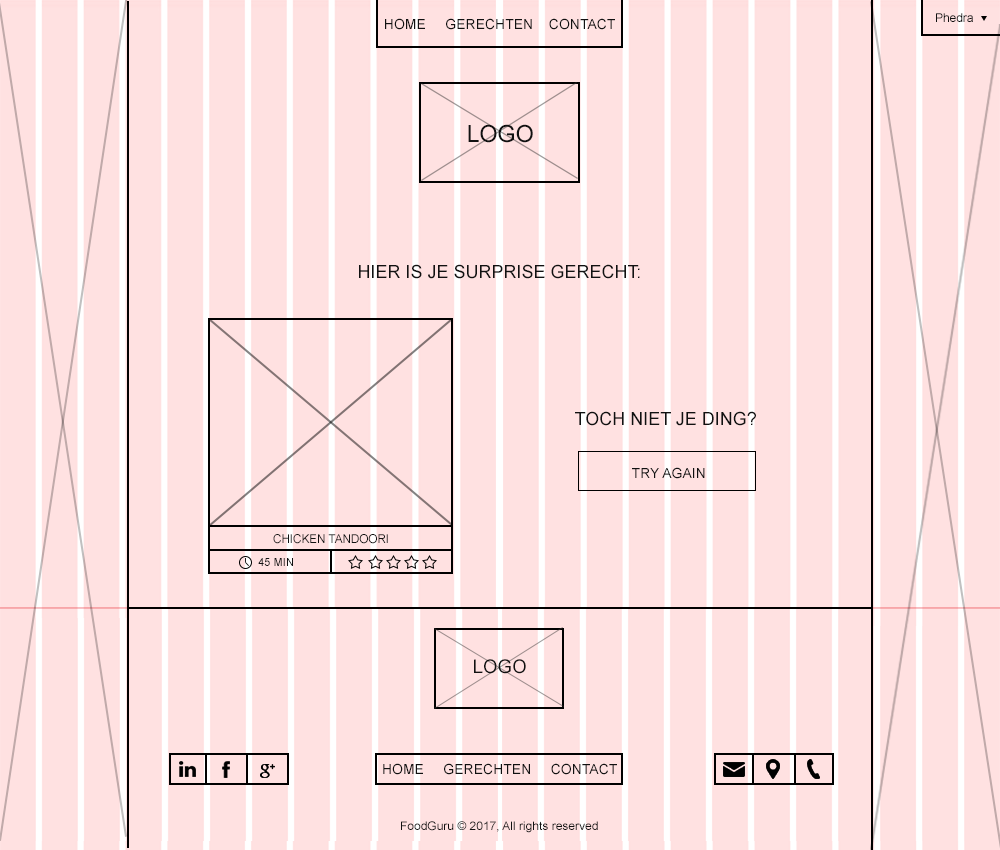
<style>
.page{position:relative;width:1000px;height:850px;background:#ffe1e1}
.page>*{position:absolute;margin:0}
.t1{font:12px "ArialMT";color:#111111}
.t2{font:14px "ArialMT";color:#111111}
.t3{font:23.5px "ArialMT";color:#111111}
.t4{font:18px "ArialMT";color:#111111}
.t5{font:11px "ArialMT";color:#111111}
</style>
<div class="page">
<p class="t1" style="left:936px;top:13px;width:37px;height:9px">Phedra</p>
<p class="t2" style="left:385px;top:18px;width:230px;height:12px">HOME     GERECHTEN    CONTACT</p>
<p class="t3" style="left:468px;top:124px;width:65px;height:19px">LOGO</p>
<p class="t4" style="left:359px;top:264px;width:281px;height:15px">HIER IS JE SURPRISE GERECHT:</p>
<p class="t4" style="left:575px;top:411px;width:181px;height:15px">TOCH NIET JE DING?</p>
<p class="t2" style="left:632px;top:467px;width:73px;height:12px">TRY AGAIN</p>
<p class="t1" style="left:273px;top:534px;width:115px;height:10px">CHICKEN TANDOORI</p>
<p class="t5" style="left:258px;top:558px;width:35px;height:8px">45 MIN</p>
</div>
